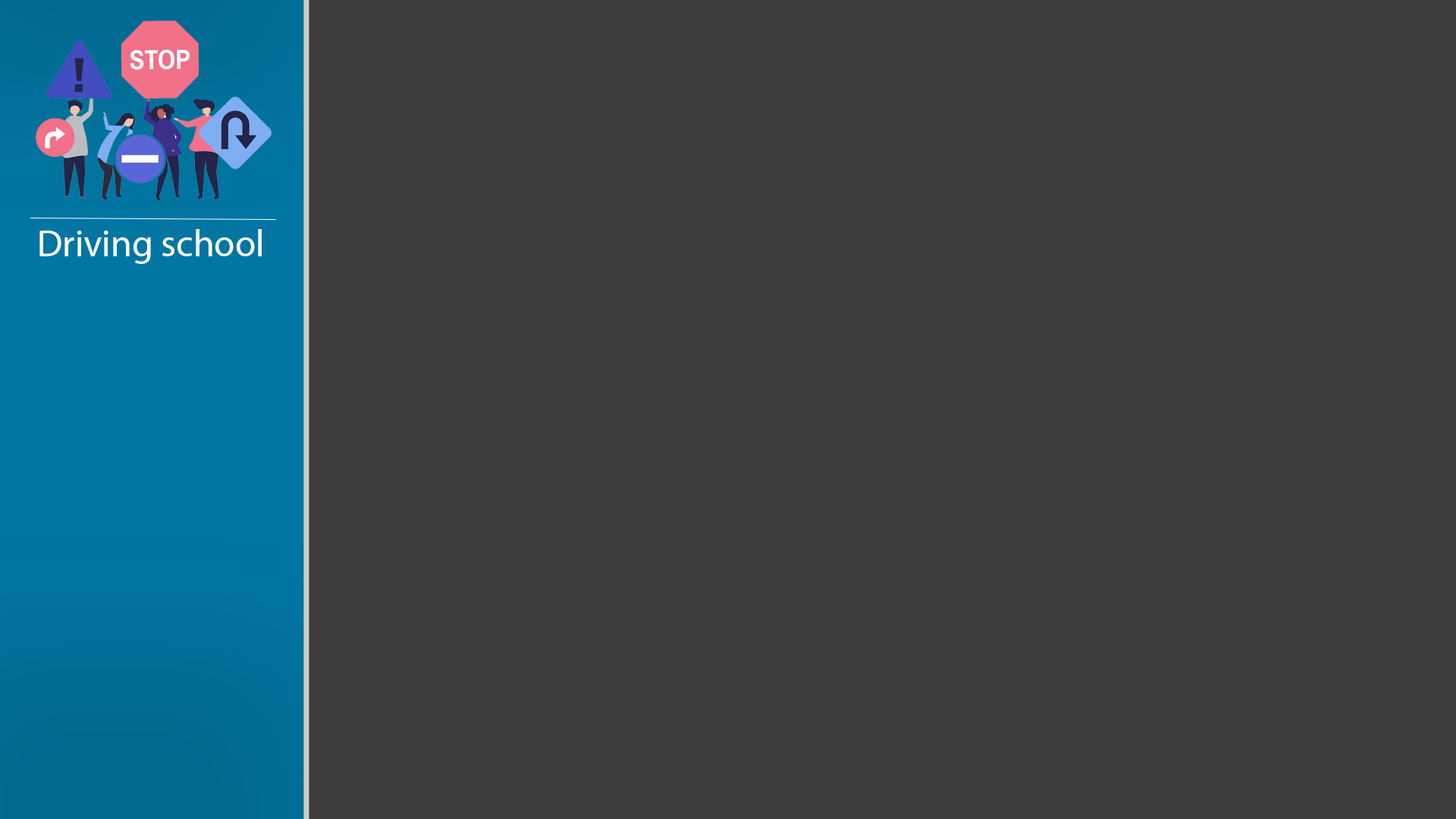
<style>
.page{position:relative;width:1456px;height:819px;background:#3d3d3d}
.page>*{position:absolute;margin:0}
.t1{font:9.1px "MyriadPro-Regular";color:#ffffff}
</style>
<div class="page">
<p class="t1" style="left:39px;top:229px;width:223px;height:35px">Driving school</p>
</div>
